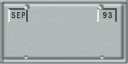
<style>
.page{position:relative;width:128px;height:64px;background:#b0b8b8}
.page>*{position:absolute;margin:0}
.t1{font:9px "FranklinGothic-Medium";letter-spacing:0.14em;color:#444747;font-weight:bold;scale:0.75 1}
.t2{font:9px "FranklinGothic-Medium";letter-spacing:0.14em;color:#424545;font-weight:bold;scale:0.75 1}
</style>
<div class="page">
<p class="t1" style="left:11px;top:12px;width:15px;height:7px">SEP</p>
<p class="t2" style="left:103px;top:12px;width:9px;height:7px">93</p>
</div>
